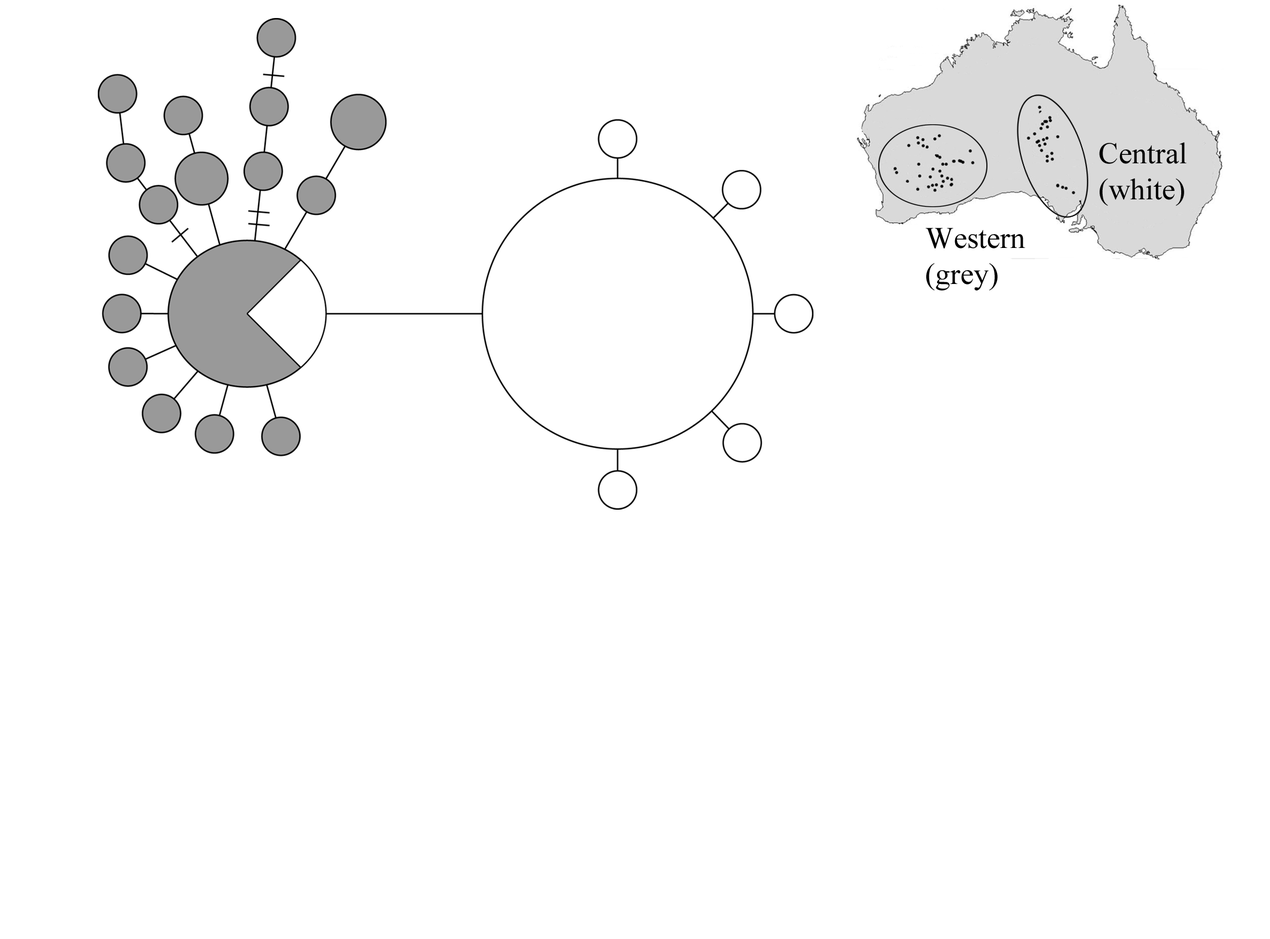
<style>
.page{position:relative;width:1270px;height:939px;background:#ffffff}
.page>*{position:absolute;margin:0}
.t1{font:30px "TimesNewRomanPSMT";color:#000000}
</style>
<div class="page">
<p class="t1" style="left:1099px;top:142px;width:88px;height:64px">Central<br>(white)</p>
<p class="t1" style="left:926px;top:227px;width:100px;height:63px">Western<br>(grey)</p>
</div>
